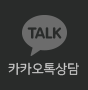
<style>
.page{position:relative;width:88px;height:90px;background:#292b2a}
.page>*{position:absolute;margin:0}
.t1{font:13px "NanumSquareR";color:#c7c7c7}
</style>
<div class="page">
<p class="t1" style="left:8px;top:62px;width:71px;height:14px">카카오톡상담</p>
</div>
